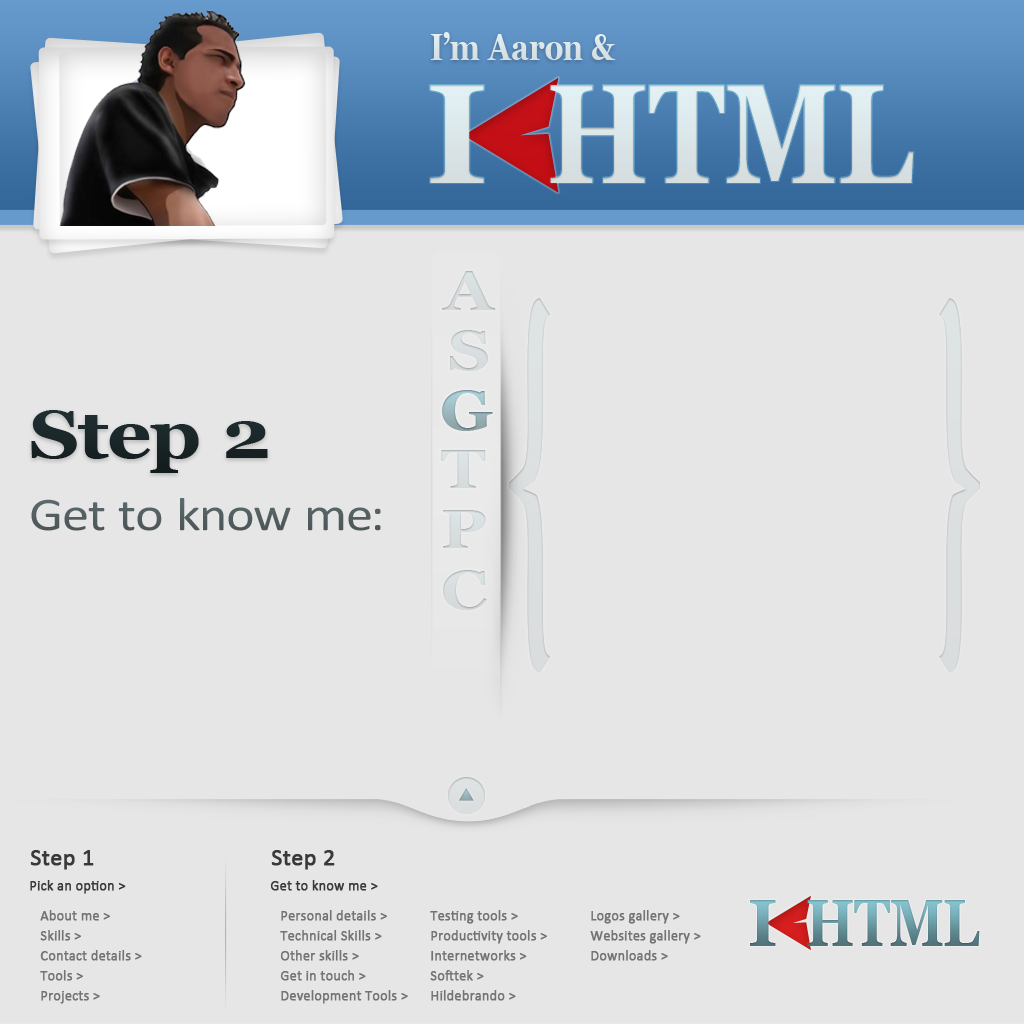
<style>
.page{position:relative;width:1024px;height:1024px;background:#e6e6e6}
.page>*{position:absolute;margin:0}
.t1{font:38.3px "Georgia-Bold";color:#d9e3e6;scale:0.79 1}
.t2{font:141px "Georgia-Bold";letter-spacing:-0.22em;color:#dae5e8}
.t3{font:141.4px "Georgia-Bold";color:#dae5e8;scale:0.79 1}
.t4{font:56.3px "Georgia-Bold";color:#d5dadb;scale:1.15 1}
.t5{font:56.3px "Georgia-Bold";color:#d7ddde;scale:1.15 1}
.t6{font:56.3px "Georgia-Bold";scale:1.15 1}
.t7{font:68.2px "Georgia-Bold";color:#1a2628;scale:1.15 1}
.t8{font:54.5px "Georgia-Bold";color:#d8ddde;scale:1.19 1}
.t9{font:47.1px "Calibri";color:#535d5f;scale:1.15 1}
.t10{font:54.5px "Georgia-Bold";color:#d8dedf;scale:1.19 1}
.t11{font:54.5px "Georgia-Bold";color:#d6dcdd;scale:1.19 1}
.t12{font:23.7px "Calibri";color:#393939;font-weight:bold}
.t13{font:14px "Calibri";color:#393939;font-weight:bold}
.t14{font:66.8px "Georgia-Bold";letter-spacing:-0.22em}
.t15{font:67px "Georgia-Bold";scale:0.79 1}
.t16{font:14px/20px "Calibri";color:#737373;font-weight:bold}
</style>
<div class="page">
<p class="t1" style="left:430px;top:32px;width:186px;height:28px">I’m Aaron &amp;</p>
<p class="t2" style="left:430px;top:85px;width:54px;height:98px">I</p>
<p class="t3" style="left:550px;top:85px;width:364px;height:98px">HTML</p>
<p class="t4" style="left:442px;top:271px;width:54px;height:39px">A</p>
<p class="t5" style="left:450px;top:330px;width:38px;height:41px">S</p>
<p class="t6" style="left:442px;top:390px;width:51px;height:41px">G</p>
<p class="t6" style="left:442px;top:390px;width:51px;height:41px">G</p>
<p class="t7" style="left:31px;top:410px;width:237px;height:63px">Step 2</p>
<p class="t8" style="left:441px;top:450px;width:45px;height:38px">T</p>
<p class="t9" style="left:31px;top:498px;width:350px;height:33px">Get to know me:</p>
<p class="t10" style="left:443px;top:510px;width:43px;height:38px">P</p>
<p class="t11" style="left:443px;top:570px;width:44px;height:40px">C</p>
<p class="t12" style="left:30px;top:850px;width:64px;height:20px">Step 1</p>
<p class="t12" style="left:271px;top:850px;width:64px;height:20px">Step 2</p>
<p class="t13" style="left:30px;top:880px;width:96px;height:14px">Pick an option &gt;</p>
<p class="t13" style="left:270px;top:880px;width:108px;height:11px">Get to know me &gt;</p>
<p class="t14" style="left:750px;top:900px;width:26px;height:46px">I</p>
<p class="t15" style="left:807px;top:900px;width:173px;height:46px">HTML</p>
<p class="t16" style="left:40px;top:910px;width:102px;height:94px">About me &gt;<br>Skills &gt;<br>Contact details &gt;<br>Tools &gt;<br>Projects &gt;<br>Gallery &gt;</p>
<p class="t16" style="left:280px;top:910px;width:128px;height:94px">Personal details &gt;<br>Technical Skills &gt;<br>Other skills &gt;<br>Get in touch &gt;<br>Development Tools &gt;</p>
<p class="t16" style="left:430px;top:910px;width:117px;height:91px">Testing tools &gt;<br>Productivity tools &gt;<br>Internetworks &gt;<br>Softtek &gt;<br>Hildebrando &gt;</p>
<p class="t16" style="left:590px;top:910px;width:111px;height:51px">Logos gallery &gt;<br>Websites gallery &gt;<br>Downloads &gt;</p>
</div>
